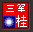
<style>
.page{position:relative;width:33px;height:32px;background:#f20000}
.page>*{position:absolute;margin:0}
.t1{font:10.4px "SimSun";color:#ffffff}
.t2{font:11.7px "SimSun";color:#ffffff}
</style>
<div class="page">
<p class="t1" style="left:6px;top:4px;width:19px;height:8px">三军</p>
<p class="t2" style="left:16px;top:15px;width:11px;height:12px">桂</p>
</div>
